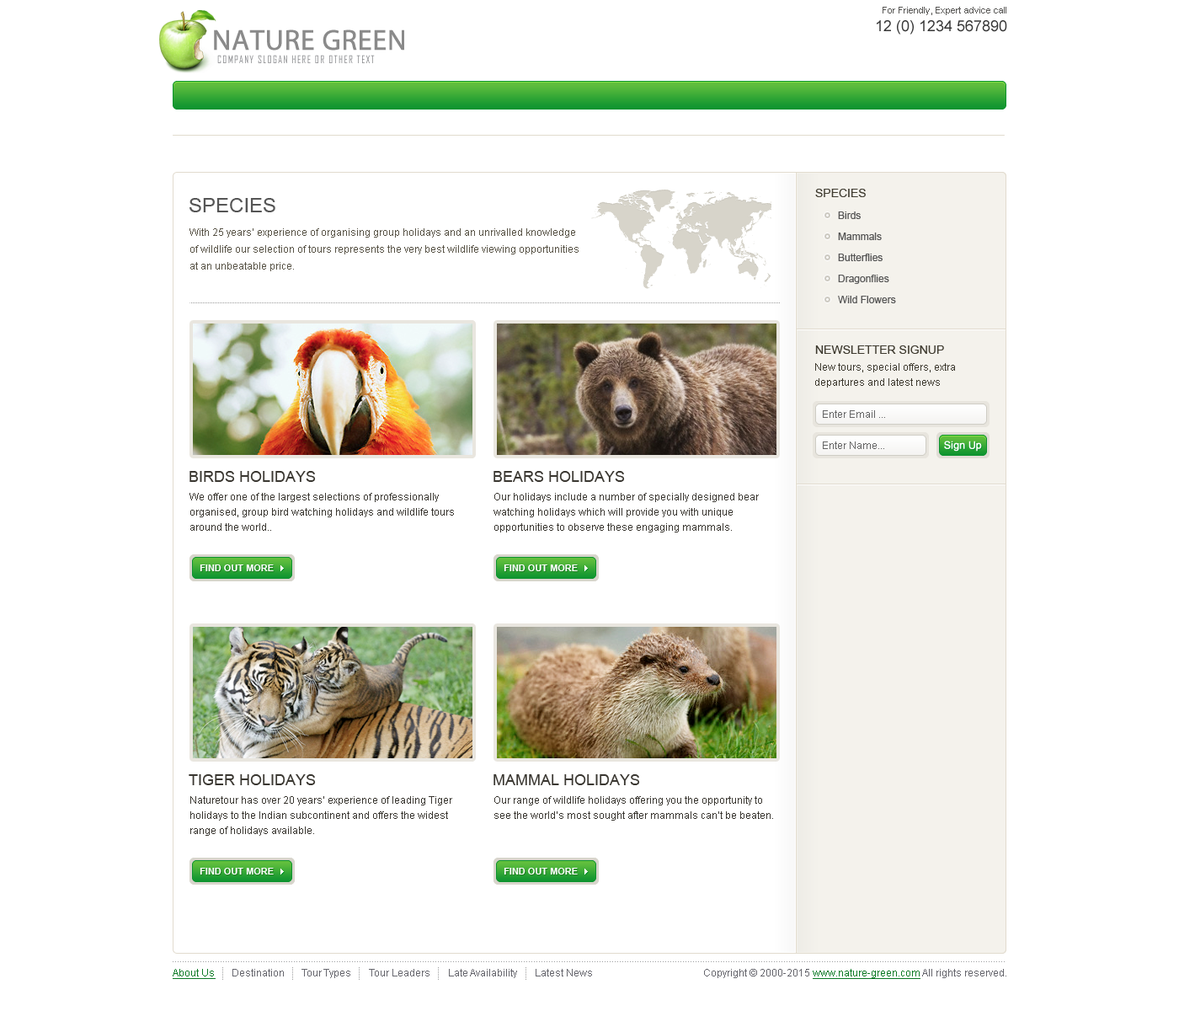
<style>
.page{position:relative;width:1179px;height:1011px;background:#ffffff}
.page>*{position:absolute;margin:0}
.t1{font:9.3px "ArialMT";color:#585755}
.t2{font:28.6px "MyriadPro-Regular";color:#8a8a8a;font-weight:bold}
.t3{font:15.2px "ArialMT";color:#373737}
.t4{font:10.1px "AgencyFB-Reg";letter-spacing:0.1em;color:#858689;text-transform:uppercase}
.t5{font:20.2px "ArialMT";color:#555555;text-transform:uppercase}
.t6{font:11.8px "ArialMT";color:#3f3b30;text-transform:uppercase}
.t7{font:10.1px/21.1px "ArialMT";color:#555555}
.t8{font:10.1px/16.8px "ArialMT";color:#595447}
.t9{font:10.1px/15.2px "ArialMT";color:#3f3b30}
.t10{font:10.1px "ArialMT";color:#666666}
.t11{font:15.2px "ArialMT";color:#3a3731;text-transform:uppercase}
.t12{font:10.1px/15.2px "ArialMT";color:#3a3731}
.t13{font:10.1px "ArialMT";color:#0e7b27;text-decoration:underline}
.t14{font:10.1px "ArialMT";color:#66666d}
</style>
<div class="page">
<p class="t1" style="left:883px;top:7px;width:124px;height:8px">For Friendly, Expert advice call</p>
<p class="t2" style="left:214px;top:29px;width:190px;height:22px">NATURE GREEN</p>
<p class="t3" style="left:877px;top:20px;width:131px;height:15px">12 (0) 1234 567890</p>
<p class="t2" style="left:214px;top:30px;width:190px;height:21px">NATURE GREEN</p>
<p class="t4" style="left:217px;top:55px;width:158px;height:8px">company slogan here or other text</p>
<p class="t5" style="left:190px;top:198px;width:85px;height:14px">Species</p>
<p class="t6" style="left:816px;top:189px;width:50px;height:8px">Species</p>
<p class="t7" style="left:838px;top:211px;width:58px;height:92px">Birds<br>Mammals<br>Butterflies<br>Dragonflies<br>Wild Flowers</p>
<p class="t8" style="left:190px;top:228px;width:389px;height:43px">With 25 years’ experience of organising group holidays and an unrivalled knowledge of wildlife our selection of tours represents the very best wildlife viewing opportunities at an unbeatable price.</p>
<p class="t6" style="left:816px;top:345px;width:128px;height:9px">Newsletter Signup</p>
<p class="t9" style="left:816px;top:363px;width:139px;height:25px">New tours, special offers, extra departures and latest news</p>
<p class="t10" style="left:823px;top:410px;width:62px;height:8px">Enter Email ...</p>
<p class="t10" style="left:823px;top:441px;width:62px;height:8px">Enter Name...</p>
<p class="t11" style="left:190px;top:471px;width:126px;height:11px">Birds Holidays</p>
<p class="t11" style="left:494px;top:471px;width:131px;height:11px">Bears Holidays</p>
<p class="t12" style="left:190px;top:493px;width:264px;height:38px">We offer one of the largest selections of professionally organised, group bird watching holidays and wildlife tours around the world..</p>
<p class="t12" style="left:494px;top:493px;width:265px;height:39px">Our holidays include a number of specially designed bear watching holidays which will provide you with unique opportunities to observe these engaging mammals.</p>
<p class="t11" style="left:189px;top:774px;width:127px;height:11px">Tiger Holidays</p>
<p class="t11" style="left:494px;top:774px;width:146px;height:11px">Mammal Holidays</p>
<p class="t12" style="left:190px;top:796px;width:262px;height:40px">Naturetour has over 20 years’ experience of leading Tiger holidays to the Indian subcontinent and offers the widest range of holidays available.</p>
<p class="t12" style="left:495px;top:796px;width:278px;height:25px">Our range of wildlife holidays offering you the opportunity to see the world’s most sought after mammals can’t be beaten.</p>
<p class="t13" style="left:173px;top:969px;width:43px;height:10px">About Us</p>
<p class="t14" style="left:233px;top:969px;width:51px;height:7px">Destination</p>
<p class="t14" style="left:302px;top:969px;width:48px;height:9px">Tour Types</p>
<p class="t14" style="left:369px;top:969px;width:61px;height:7px">Tour Leaders</p>
<p class="t14" style="left:449px;top:969px;width:68px;height:9px">Late Availability</p>
<p class="t14" style="left:536px;top:969px;width:56px;height:7px">Latest News</p>
<p class="t14" style="left:704px;top:969px;width:303px;height:10px">Copyright © 2000-2015 <span class="t13">www.nature-green.com</span> All rights reserved.</p>
</div>
